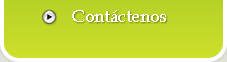
<style>
.page{position:relative;width:227px;height:62px}
.page>*{position:absolute;margin:0}
.t1{font:18px "BookAntiqua";letter-spacing:-0.02em;color:#ffffff}
</style>
<div class="page">
<p class="t1" style="left:72px;top:10px;width:94px;height:12px">Contáctenos</p>
</div>
